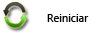
<style>
.page{position:relative;width:109px;height:33px;background:#ffffff}
.page>*{position:absolute;margin:0}
.t1{font:11px "SegoeUI";color:#000000}
</style>
<div class="page">
<p class="t1" style="left:47px;top:14px;width:42px;height:8px">Reiniciar</p>
</div>
